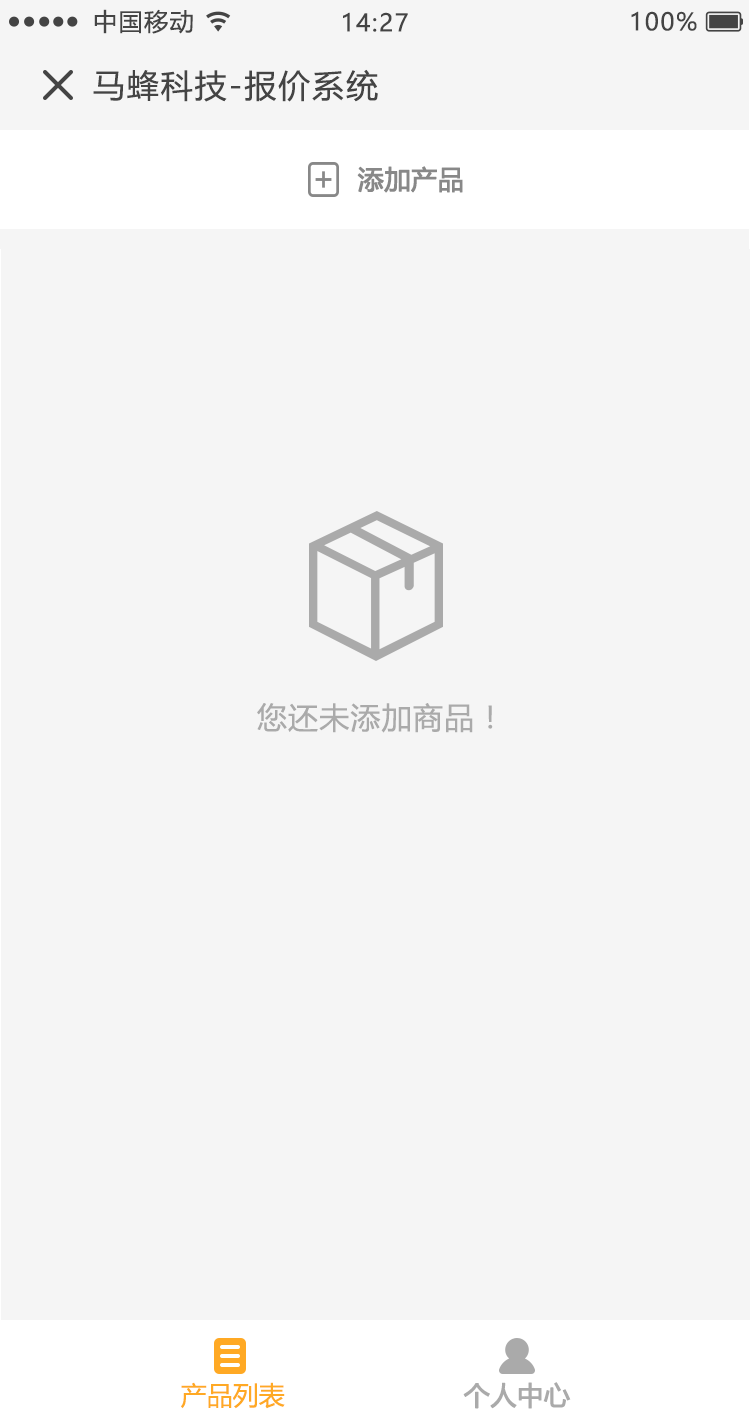
<style>
.page{position:relative;width:750px;height:1424px;background:#f5f5f5}
.page>*{position:absolute;margin:0}
.t1{font:24px "MicrosoftYaHeiUI";letter-spacing:0.06em;color:#444444}
.t2{font:32px "MicrosoftYaHeiUI";letter-spacing:0.06em;color:#444444}
.t3{font:26px "MicrosoftYaHeiUI";color:#888888;font-weight:bold}
.t4{font:30px "MicrosoftYaHeiUI";letter-spacing:0.04em;color:#aaaaaa}
.t5{font:26px "MicrosoftYaHeiUI";color:#ffa924}
.t6{font:26px "MicrosoftYaHeiUI";color:#aaaaaa;font-weight:bold}
</style>
<div class="page">
<p class="t1" style="left:94px;top:9px;width:99px;height:25px">中国移动</p>
<p class="t1" style="left:343px;top:12px;width:65px;height:20px">14:27</p>
<p class="t1" style="left:631px;top:11px;width:66px;height:20px">100%</p>
<p class="t2" style="left:93px;top:69px;width:285px;height:33px">马蜂科技-报价系统</p>
<p class="t3" style="left:357px;top:166px;width:106px;height:27px">添加产品</p>
<p class="t4" style="left:257px;top:703px;width:236px;height:30px">您还未添加商品！</p>
<p class="t5" style="left:181px;top:1382px;width:104px;height:27px">产品列表</p>
<p class="t6" style="left:463px;top:1382px;width:108px;height:27px">个人中心</p>
</div>
